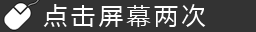
<style>
.page{position:relative;width:256px;height:32px;background:#333333}
.page>*{position:absolute;margin:0}
.t1{font:24px "MicrosoftYaHei";letter-spacing:0.15em;color:#ffffff}
</style>
<div class="page">
<p class="t1" style="left:43px;top:4px;width:163px;height:23px">点击屏幕两次</p>
</div>
